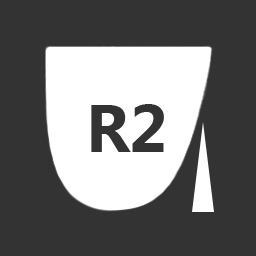
<style>
.page{position:relative;width:256px;height:256px;background:#333333}
.page>*{position:absolute;margin:0}
.t1{font:66.7px "MicrosoftNewTaiLue-Bold";color:#333333}
</style>
<div class="page">
<p class="t1" style="left:91px;top:104px;width:73px;height:48px">R2</p>
</div>
